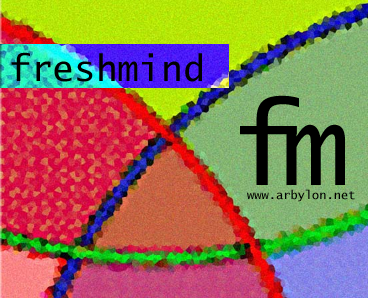
<style>
.page{position:relative;width:368px;height:298px}
.page>*{position:absolute;margin:0}
.t1{font:36px "LucidaConsole";color:#000000}
.t2{font:113.8px "LucidaConsole";color:#000000}
.t3{font:110.9px "LucidaConsole";color:#000000}
.t4{font:12px "LucidaConsole";color:#000000}
</style>
<div class="page">
<p class="t1" style="left:11px;top:52px;width:191px;height:30px">freshmind</p>
<p class="t2" style="left:240px;top:95px;width:59px;height:90px">f</p>
<p class="t3" style="left:286px;top:124px;width:59px;height:61px">m</p>
<p class="t4" style="left:247px;top:189px;width:108px;height:13px">www.arbylon.net</p>
</div>
